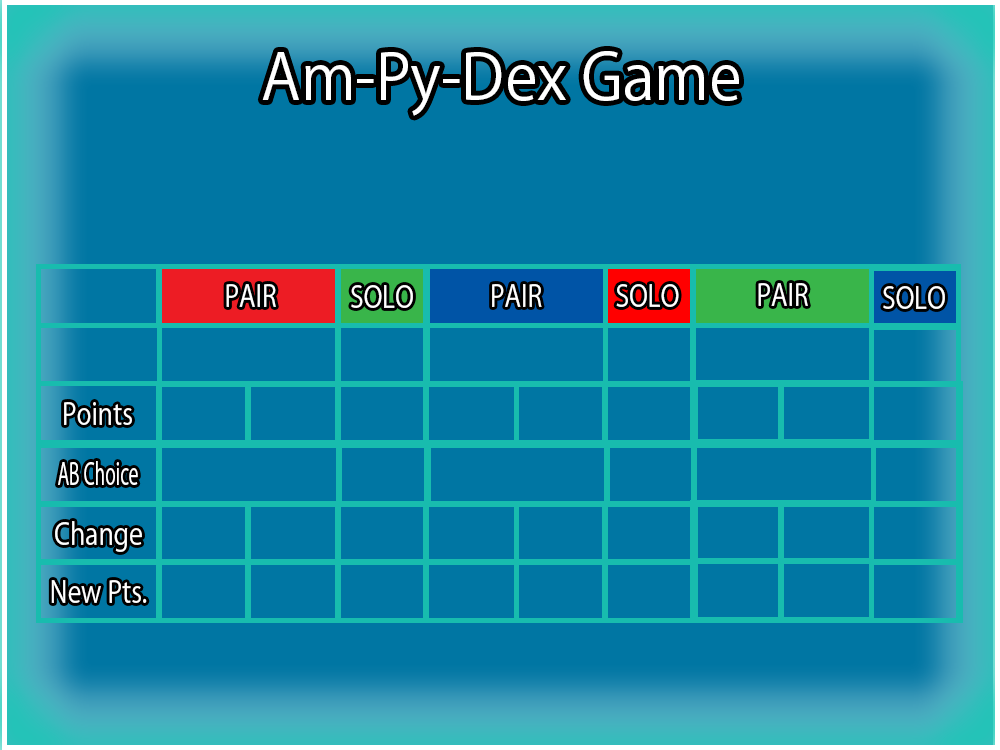
<style>
.page{position:relative;width:1000px;height:750px;background:#0076a3}
.page>*{position:absolute;margin:0}
.t1{font:62.5px "KozGoPr6N-Regular";color:#ffffff;scale:0.97 1}
.t2{font:30.2px "KozGoPr6N-Regular";color:#ffffff;scale:0.84 1}
.t3{font:30.2px "KozGoPr6N-Regular";color:#ffffff;scale:0.59 1}
</style>
<div class="page">
<p class="t1" style="left:262px;top:51px;width:477px;height:65px">Am-Py-Dex Game</p>
<p class="t2" style="left:226px;top:284px;width:50px;height:23px">PAIR</p>
<p class="t2" style="left:351px;top:285px;width:62px;height:23px">SOLO</p>
<p class="t2" style="left:492px;top:284px;width:50px;height:23px">PAIR</p>
<p class="t2" style="left:616px;top:284px;width:63px;height:23px">SOLO</p>
<p class="t2" style="left:758px;top:283px;width:50px;height:23px">PAIR</p>
<p class="t2" style="left:883px;top:286px;width:62px;height:23px">SOLO</p>
<p class="t2" style="left:64px;top:402px;width:68px;height:23px">Points</p>
<p class="t3" style="left:58px;top:461px;width:80px;height:24px">AB Choice</p>
<p class="t2" style="left:55px;top:521px;width:87px;height:31px">Change</p>
<p class="t2" style="left:51px;top:580px;width:96px;height:23px">New Pts.</p>
</div>
